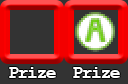
<style>
.page{position:relative;width:128px;height:84px;background:#333333}
.page>*{position:absolute;margin:0}
.t1{font:18px "CourierNewPS-BoldMT";letter-spacing:-0.08em;color:#ffffff}
</style>
<div class="page">
<p class="t1" style="left:9px;top:67px;width:47px;height:11px">Prize</p>
<p class="t1" style="left:73px;top:67px;width:47px;height:11px">Prize</p>
</div>
